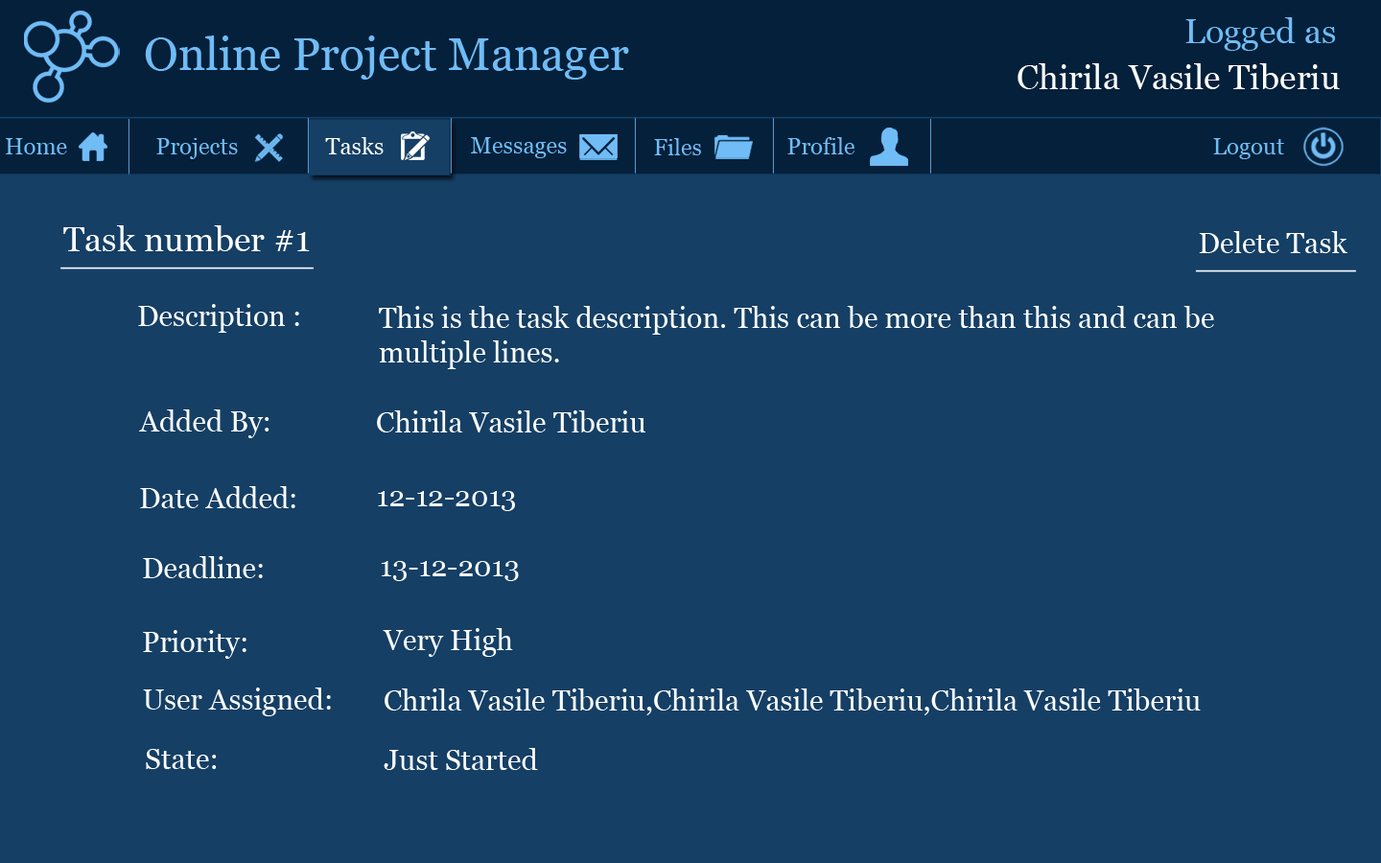
<style>
.page{position:relative;width:1381px;height:863px;background:#153f65}
.page>*{position:absolute;margin:0}
.t1{font:34.5px "Georgia";color:#70bcf6}
.t2{font:46px "Georgia";color:#70bcf6}
.t3{font:34.5px "Georgia";color:#fefefe}
.t4{font:23px "Georgia";color:#ffffff}
.t5{font:23px "Georgia";color:#70bcf6}
.t6{font:34.5px "Georgia";color:#ffffff}
.t7{font:28.8px "Georgia";color:#ffffff}
</style>
<div class="page">
<p class="t1" style="left:1186px;top:17px;width:150px;height:34px">Logged as</p>
<p class="t2" style="left:145px;top:35px;width:484px;height:45px">Online Project Manager</p>
<p class="t3" style="left:1018px;top:63px;width:322px;height:26px">Chirila Vasile Tiberiu</p>
<p class="t4" style="left:325px;top:137px;width:59px;height:17px">Tasks</p>
<p class="t5" style="left:471px;top:137px;width:96px;height:21px">Messages</p>
<p class="t5" style="left:788px;top:137px;width:67px;height:17px">Profile</p>
<p class="t5" style="left:6px;top:138px;width:61px;height:16px">Home</p>
<p class="t5" style="left:156px;top:138px;width:82px;height:21px">Projects</p>
<p class="t5" style="left:654px;top:138px;width:47px;height:17px">Files</p>
<p class="t5" style="left:1213px;top:138px;width:71px;height:21px">Logout</p>
<p class="t6" style="left:63px;top:225px;width:247px;height:26px">Task number #1</p>
<p class="t7" style="left:1199px;top:231px;width:149px;height:22px">Delete Task</p>
<p class="t7" style="left:138px;top:304px;width:161px;height:29px">Description :</p>
<p class="t7" style="left:379px;top:306px;width:835px;height:63px">This is the task description. This can be more than this and can be <br>multiple lines.</p>
<p class="t7" style="left:139px;top:410px;width:131px;height:28px">Added By:</p>
<p class="t7" style="left:377px;top:411px;width:269px;height:22px">Chirila Vasile Tiberiu</p>
<p class="t7" style="left:140px;top:486px;width:155px;height:22px">Date Added:</p>
<p class="t7" style="left:378px;top:491px;width:137px;height:20px">12-12-2013</p>
<p class="t7" style="left:143px;top:556px;width:120px;height:22px">Deadline:</p>
<p class="t7" style="left:381px;top:561px;width:138px;height:20px">13-12-2013</p>
<p class="t7" style="left:383px;top:628px;width:130px;height:29px">Very High</p>
<p class="t7" style="left:143px;top:630px;width:104px;height:29px">Priority:</p>
<p class="t7" style="left:143px;top:688px;width:188px;height:29px">User Assigned:</p>
<p class="t7" style="left:385px;top:689px;width:816px;height:27px">Chrila Vasile Tiberiu,Chirila Vasile Tiberiu,Chirila Vasile Tiberiu</p>
<p class="t7" style="left:146px;top:749px;width:71px;height:20px">State:</p>
<p class="t7" style="left:384px;top:748px;width:154px;height:22px">Just Started</p>
</div>
